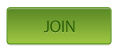
<style>
.page{position:relative;width:120px;height:51px;background:#ffffff}
.page>*{position:absolute;margin:0}
.t1{font:16.6px "MyriadPro-Regular";color:#235900}
.t2{font:12.8px "MyriadPro-Regular";color:#235900}
</style>
<div class="page">
<p class="t1" style="left:43px;top:20px;width:32px;height:13px"><span class="t2">  </span>    JOIN</p>
</div>
